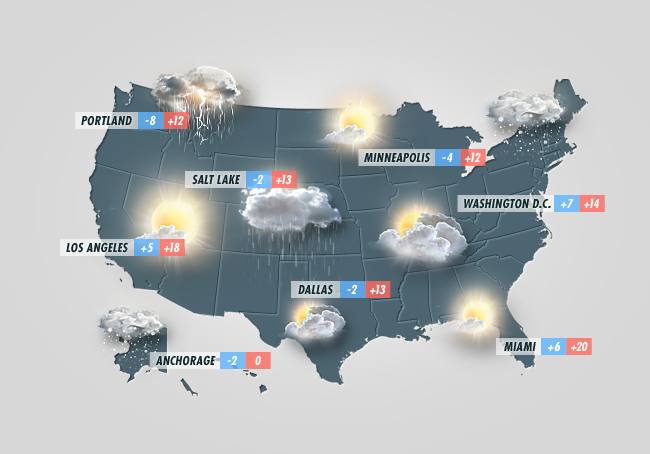
<style>
.page{position:relative;width:650px;height:454px}
.page>*{position:absolute;margin:0}
.t1{font:12px "Futura-Condensed-BoldItalic";letter-spacing:0.025em;color:#10292e;text-transform:uppercase}
.t2{font:12px "Futura-Condensed-BoldItalic";letter-spacing:0.05em;color:#ffffff;text-transform:uppercase}
.t3{font:12px "Futura-Condensed-BoldItalic";letter-spacing:-0.025em;color:#ffffff;text-transform:uppercase}
</style>
<div class="page">
<p class="t1" style="left:81px;top:116px;width:51px;height:10px">Portland</p>
<p class="t2" style="left:145px;top:115px;width:11px;height:10px">-8</p>
<p class="t3" style="left:168px;top:115px;width:16px;height:10px">+12</p>
<p class="t1" style="left:364px;top:152px;width:66px;height:11px">minneapolis</p>
<p class="t2" style="left:442px;top:153px;width:11px;height:9px">-4</p>
<p class="t3" style="left:465px;top:152px;width:16px;height:10px">+12</p>
<p class="t1" style="left:192px;top:174px;width:49px;height:11px">Salt lake</p>
<p class="t2" style="left:253px;top:174px;width:11px;height:10px">-2</p>
<p class="t3" style="left:276px;top:174px;width:16px;height:11px">+13</p>
<p class="t1" style="left:464px;top:198px;width:87px;height:11px">washington d.c.</p>
<p class="t3" style="left:584px;top:198px;width:16px;height:10px">+14</p>
<p class="t2" style="left:561px;top:199px;width:13px;height:9px">+7</p>
<p class="t1" style="left:66px;top:242px;width:62px;height:11px">Los Angeles</p>
<p class="t2" style="left:141px;top:243px;width:13px;height:10px">+5</p>
<p class="t3" style="left:164px;top:242px;width:16px;height:10px">+18</p>
<p class="t1" style="left:298px;top:284px;width:35px;height:11px">dallas</p>
<p class="t2" style="left:347px;top:284px;width:11px;height:10px">-2</p>
<p class="t3" style="left:370px;top:284px;width:16px;height:11px">+13</p>
<p class="t1" style="left:504px;top:342px;width:32px;height:9px">miami</p>
<p class="t2" style="left:548px;top:342px;width:12px;height:10px">+6</p>
<p class="t3" style="left:571px;top:341px;width:17px;height:10px">+20</p>
<p class="t1" style="left:155px;top:355px;width:61px;height:11px">anchorage</p>
<p class="t2" style="left:227px;top:355px;width:11px;height:10px">-2</p>
<p class="t3" style="left:255px;top:355px;width:6px;height:10px">0</p>
</div>
